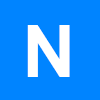
<style>
.page{position:relative;width:100px;height:100px;background:#0084ff}
.page>*{position:absolute;margin:0}
.t1{font:72px "CenturyGothic-Bold";color:#ffffff}
</style>
<div class="page">
<p class="t1" style="left:27px;top:25px;width:43px;height:52px">N</p>
</div>
